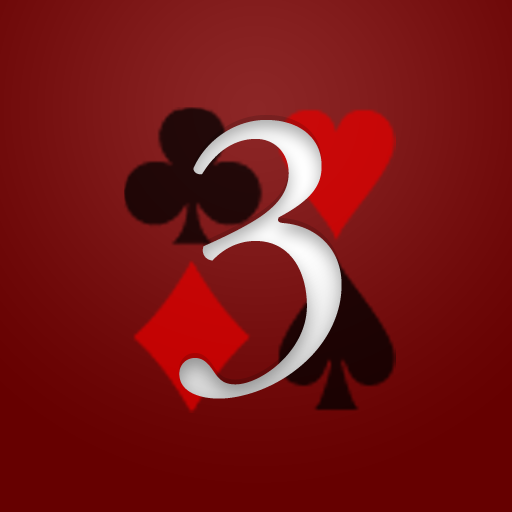
<style>
.page{position:relative;width:512px;height:512px}
.page>*{position:absolute;margin:0}
.t1{font:400px "AGaramondPro-Regular"}
</style>
<div class="page">
<p class="t1" style="left:179px;top:120px;width:163px;height:279px">3</p>
</div>
